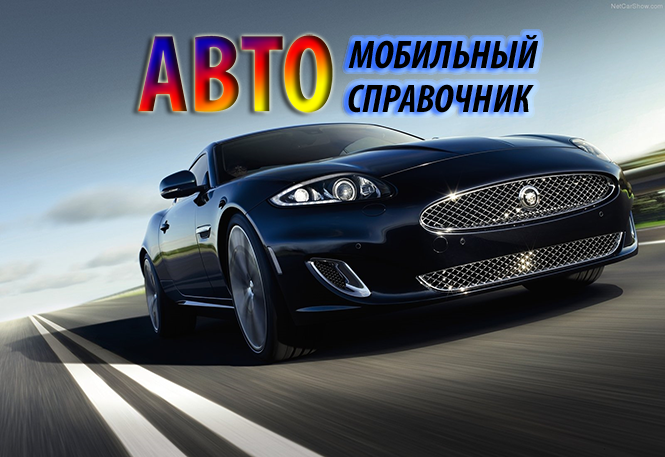
<style>
.page{position:relative;width:665px;height:457px}
.page>*{position:absolute;margin:0}
.t1{font:40px "MyriadPro-BoldCondIt";color:#000000}
</style>
<div class="page">
<p class="t1" style="left:348px;top:35px;width:190px;height:34px">МОБИЛЬНЫЙ</p>
<p class="t1" style="left:348px;top:84px;width:186px;height:29px">СПРАВОЧНИК</p>
</div>
